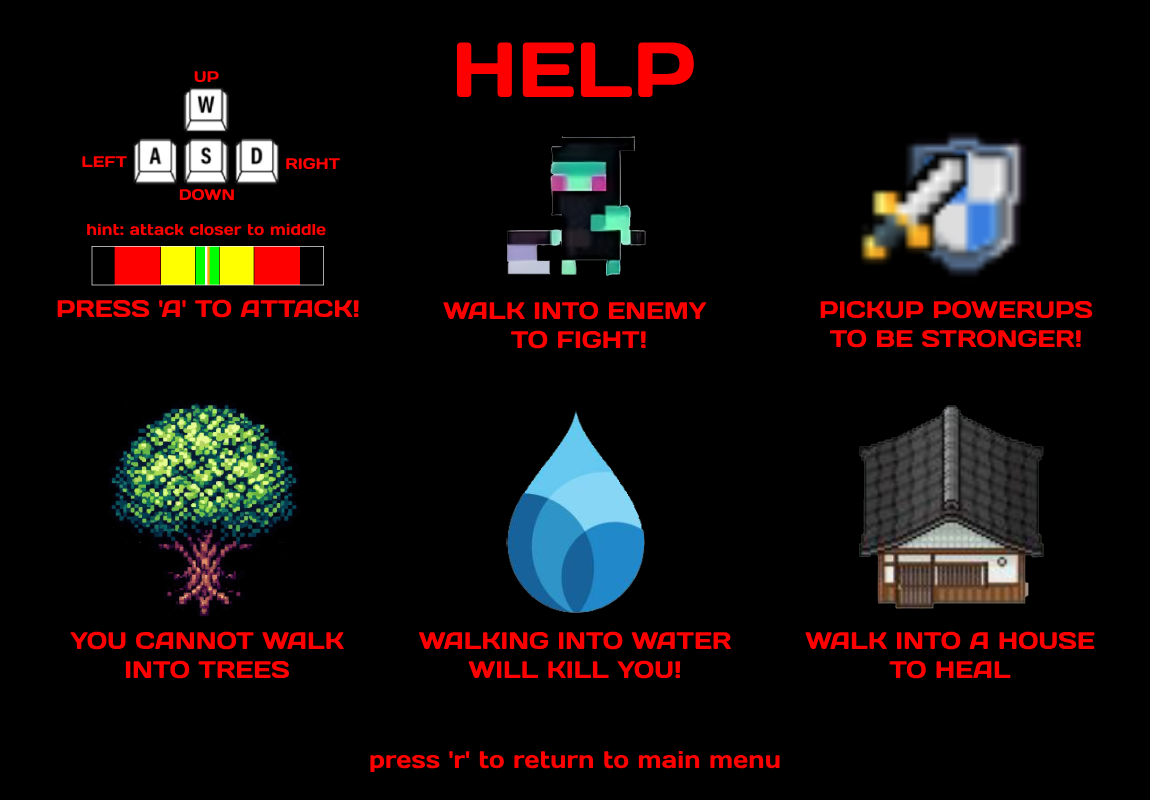
<style>
.page{position:relative;width:1150px;height:800px;background:#000000}
.page>*{position:absolute;margin:0}
.t1{font:78px "Days";color:#ff0000}
.t2{font:15.5px "Days";color:#ff0000}
.t3{font:15.9px "Days";color:#ff0000}
.t4{font:24px "Days";color:#ff0000}
</style>
<div class="page">
<p class="t1" style="left:456px;top:42px;width:238px;height:56px">HELP</p>
<p class="t2" style="left:194px;top:71px;width:25px;height:11px">UP</p>
<p class="t2" style="left:82px;top:156px;width:45px;height:11px">LEFT</p>
<p class="t2" style="left:286px;top:158px;width:54px;height:11px">RIGHT</p>
<p class="t2" style="left:179px;top:189px;width:55px;height:12px">DOWN</p>
<p class="t3" style="left:87px;top:223px;width:239px;height:13px">hint: attack closer to middle</p>
<p class="t4" style="left:57px;top:299px;width:302px;height:19px">PRESS 'A' TO ATTACK!</p>
<p class="t4" style="left:443px;top:301px;width:264px;height:48px;text-align:center">WALK INTO ENEMY <br>TO FIGHT!</p>
<p class="t4" style="left:820px;top:300px;width:273px;height:48px;text-align:center">PICKUP POWERUPS<br>TO BE STRONGER!</p>
<p class="t4" style="left:70px;top:631px;width:274px;height:48px;text-align:center">YOU CANNOT WALK<br>INTO TREES</p>
<p class="t4" style="left:418px;top:631px;width:314px;height:48px;text-align:center">WALKING INTO WATER<br>WILL KILL YOU!</p>
<p class="t4" style="left:805px;top:631px;width:290px;height:48px;text-align:center">WALK INTO A HOUSE<br>TO HEAL</p>
<p class="t4" style="left:370px;top:750px;width:410px;height:22px">press 'r' to return to main menu</p>
</div>
